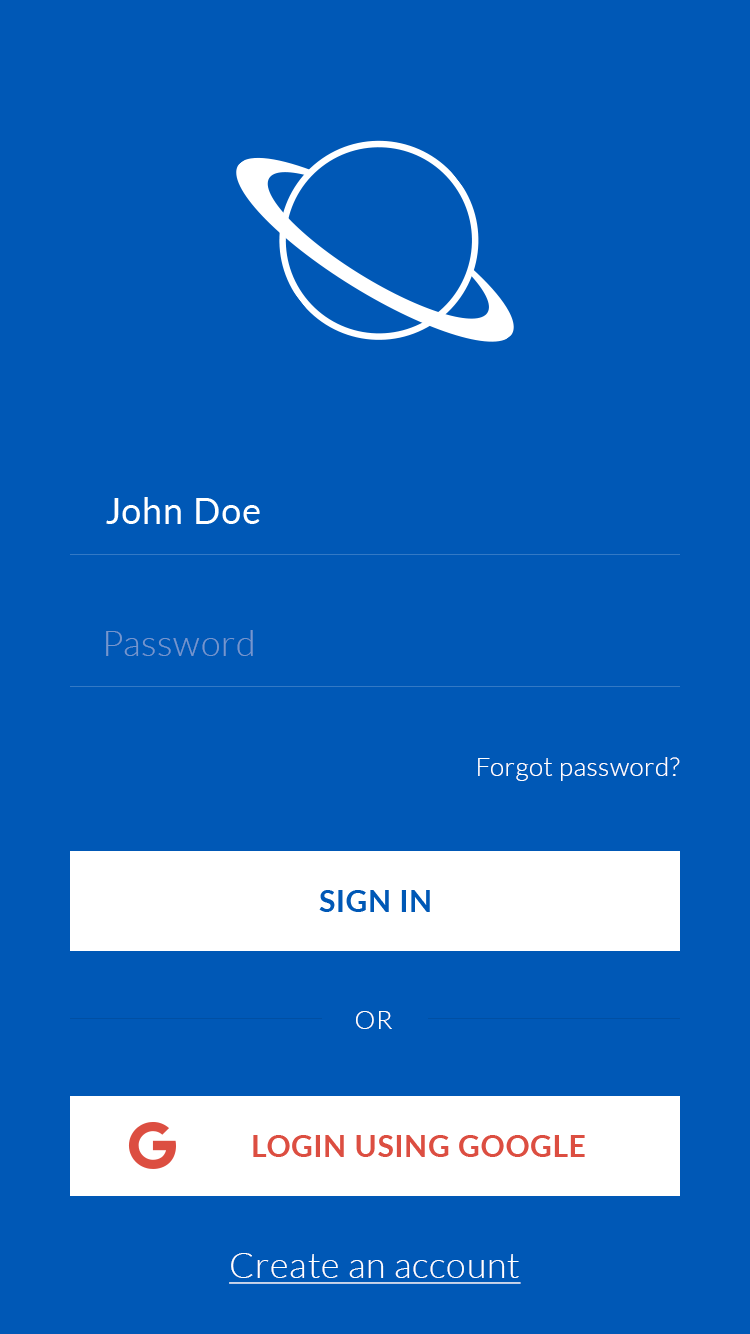
<style>
.page{position:relative;width:750px;height:1334px;background:#0058b6}
.page>*{position:absolute;margin:0}
.t1{font:36px "Lato-Regular";letter-spacing:0.02em;color:#ffffff}
.t2{font:36px "Lato-Light";letter-spacing:0.02em;color:#7496ce}
.t3{font:26px "Lato-Light";letter-spacing:0.02em;color:#ffffff}
.t4{font:30px "Lato-Bold";letter-spacing:0.02em;color:#0058b6}
.t5{font:30px "Lato-Bold";letter-spacing:0.02em;color:#dc4e41;text-transform:uppercase}
.t6{font:36px "Lato-Light";letter-spacing:0.02em;color:#ffffff;text-decoration:underline}
</style>
<div class="page">
<p class="t1" style="left:106px;top:497px;width:154px;height:27px">John Doe</p>
<p class="t2" style="left:106px;top:630px;width:147px;height:26px">Password</p>
<p class="t3" style="left:478px;top:757px;width:202px;height:24px">Forgot password?</p>
<p class="t4" style="left:319px;top:890px;width:111px;height:22px">SIGN IN</p>
<p class="t3" style="left:356px;top:1011px;width:36px;height:18px">OR</p>
<p class="t5" style="left:253px;top:1135px;width:332px;height:22px">LOGIN USING Google</p>
<p class="t6" style="left:229px;top:1253px;width:292px;height:31px">Create an account</p>
</div>
